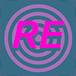
<style>
.page{position:relative;width:76px;height:76px;background:#376d84}
.page>*{position:absolute;margin:0}
.t1{font:36.9px "Arial-BoldItalicMT"}
.t2{font:36.9px "Arial-BoldItalicMT";color:#ff00d2}
</style>
<div class="page">
<p class="t1" style="left:12px;top:24px;width:53px;height:27px">RE</p>
<p class="t2" style="left:12px;top:21px;width:53px;height:27px">RE</p>
</div>
